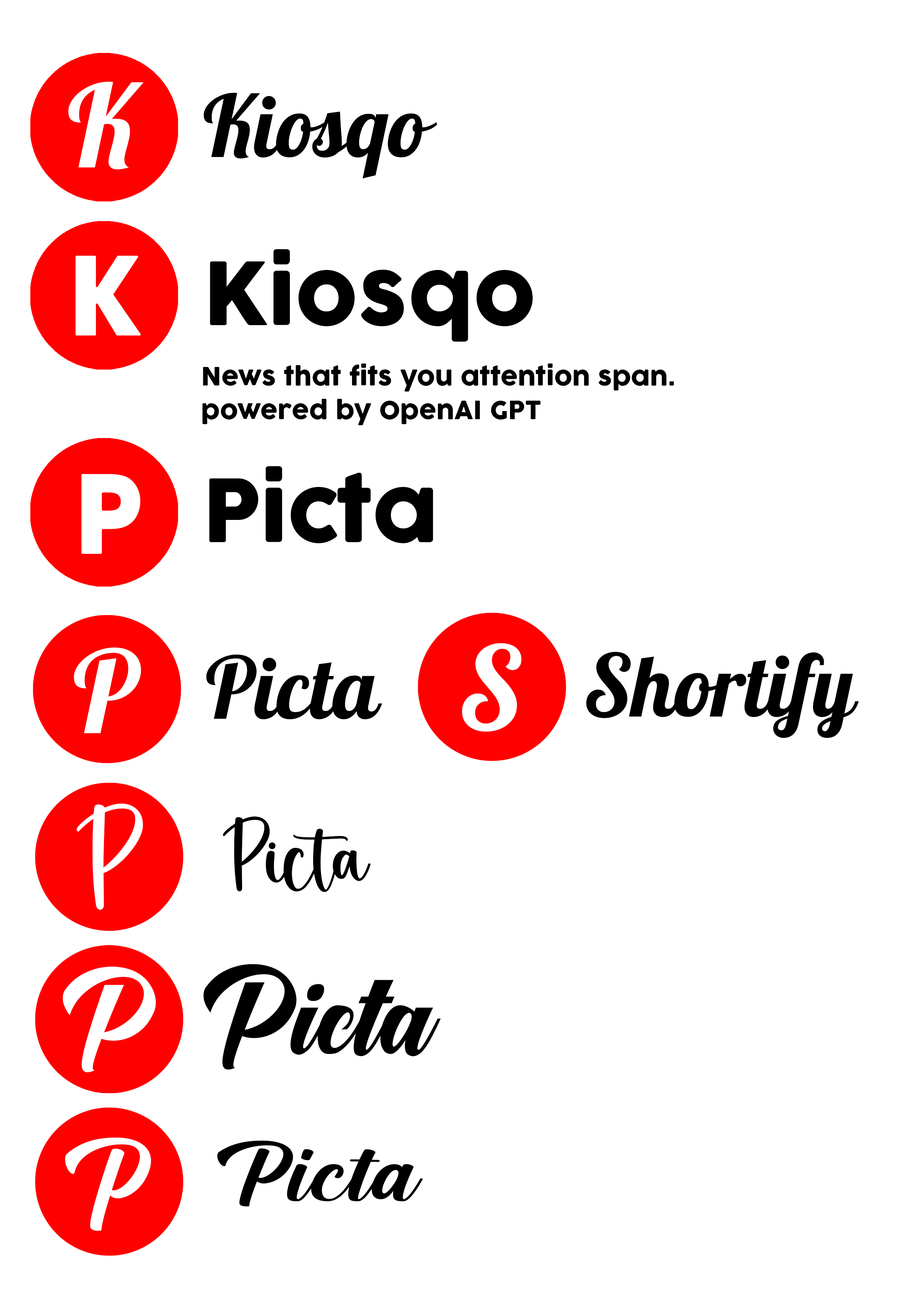
<style>
.page{position:relative;width:918px;height:1299px;background:#ffffff}
.page>*{position:absolute;margin:0}
.t1{font:114.1px "Pattaya-Regular";color:#ffffff}
.t2{font:85.6px "Pattaya-Regular";color:#000000}
.t3{font:114.1px "NewakeDemo";color:#ffffff}
.t4{font:85.6px "Cocogoose";color:#000000}
.t5{font:24.7px/33.9px "Cocogoose";color:#000000}
.t6{font:149px "HomemadeRegular";color:#ffffff}
.t7{font:105.2px "HomemadeRegular";color:#000000}
.t8{font:105.2px "OnetimeScript";color:#000000}
.t9{font:105.2px "OnetimeScript";color:#ffffff}
.t10{font:149px "CreamCake";color:#ffffff}
.t11{font:105.2px "CreamCake";color:#000000;scale:1.25 1}
</style>
<div class="page">
<p class="t1" style="left:68px;top:81px;width:76px;height:89px">K</p>
<p class="t2" style="left:204px;top:93px;width:233px;height:85px">Kiosqo</p>
<p class="t3" style="left:76px;top:255px;width:65px;height:80px">K</p>
<p class="t4" style="left:210px;top:249px;width:323px;height:93px">Kiosqo</p>
<p class="t5" style="left:203px;top:363px;width:471px;height:62px">News that fits you attention span.<br>powered by OpenAI GPT</p>
<p class="t3" style="left:81px;top:474px;width:59px;height:80px">P</p>
<p class="t4" style="left:209px;top:466px;width:224px;height:77px">Picta</p>
<p class="t1" style="left:74px;top:647px;width:67px;height:86px">P</p>
<p class="t1" style="left:462px;top:643px;width:60px;height:89px">S</p>
<p class="t2" style="left:586px;top:652px;width:273px;height:86px">Shortify</p>
<p class="t2" style="left:206px;top:654px;width:176px;height:65px">Picta</p>
<p class="t6" style="left:77px;top:803px;width:66px;height:107px">P</p>
<p class="t7" style="left:223px;top:816px;width:148px;height:76px">Picta</p>
<p class="t8" style="left:203px;top:964px;width:238px;height:106px">Picta</p>
<p class="t9" style="left:63px;top:966px;width:93px;height:106px">P</p>
<p class="t10" style="left:65px;top:1137px;width:86px;height:94px">P</p>
<p class="t11" style="left:217px;top:1140px;width:206px;height:66px">Picta</p>
</div>
